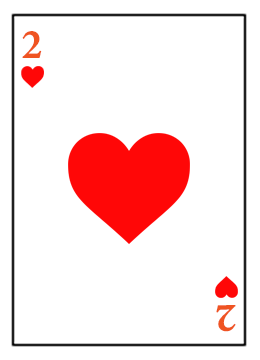
<style>
.page{position:relative;width:260px;height:360px;background:#ffffff}
.page>*{position:absolute;margin:0}
.t1{font:58.1px "AdobeArabic-Bold";color:#ef5422}
.t2{font:58.1px "AdobeArabic-Bold";color:#ef5422;scale:1.04 1}
</style>
<div class="page">
<p class="t1" style="left:22px;top:31px;width:20px;height:27px">2</p>
<p class="t2" style="left:216px;top:305px;width:20px;height:27px;rotate:179deg">2</p>
</div>
